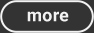
<style>
.page{position:relative;width:94px;height:33px;background:#333333}
.page>*{position:absolute;margin:0}
.t1{font:17.7px "Roboto-Bold";letter-spacing:0.02em;color:#f2f2f2}
</style>
<div class="page">
<p class="t1" style="left:27px;top:11px;width:42px;height:11px">more</p>
</div>
